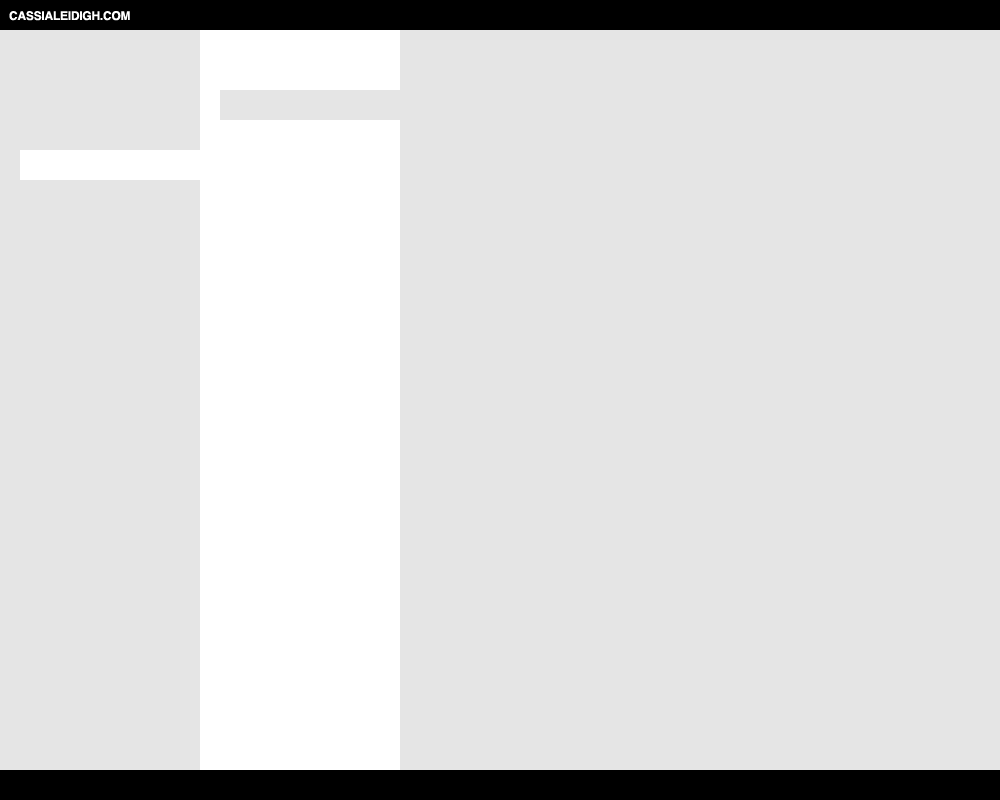
<style>
.page{position:relative;width:1000px;height:800px;background:#e5e5e5}
.page>*{position:absolute;margin:0}
.t1{font:12px "Helvetica-Bold";letter-spacing:-0.02em;color:#ffffff;text-transform:uppercase}
</style>
<div class="page">
<p class="t1" style="left:9px;top:11px;width:121px;height:10px">Cassialeidigh.com</p>
</div>
